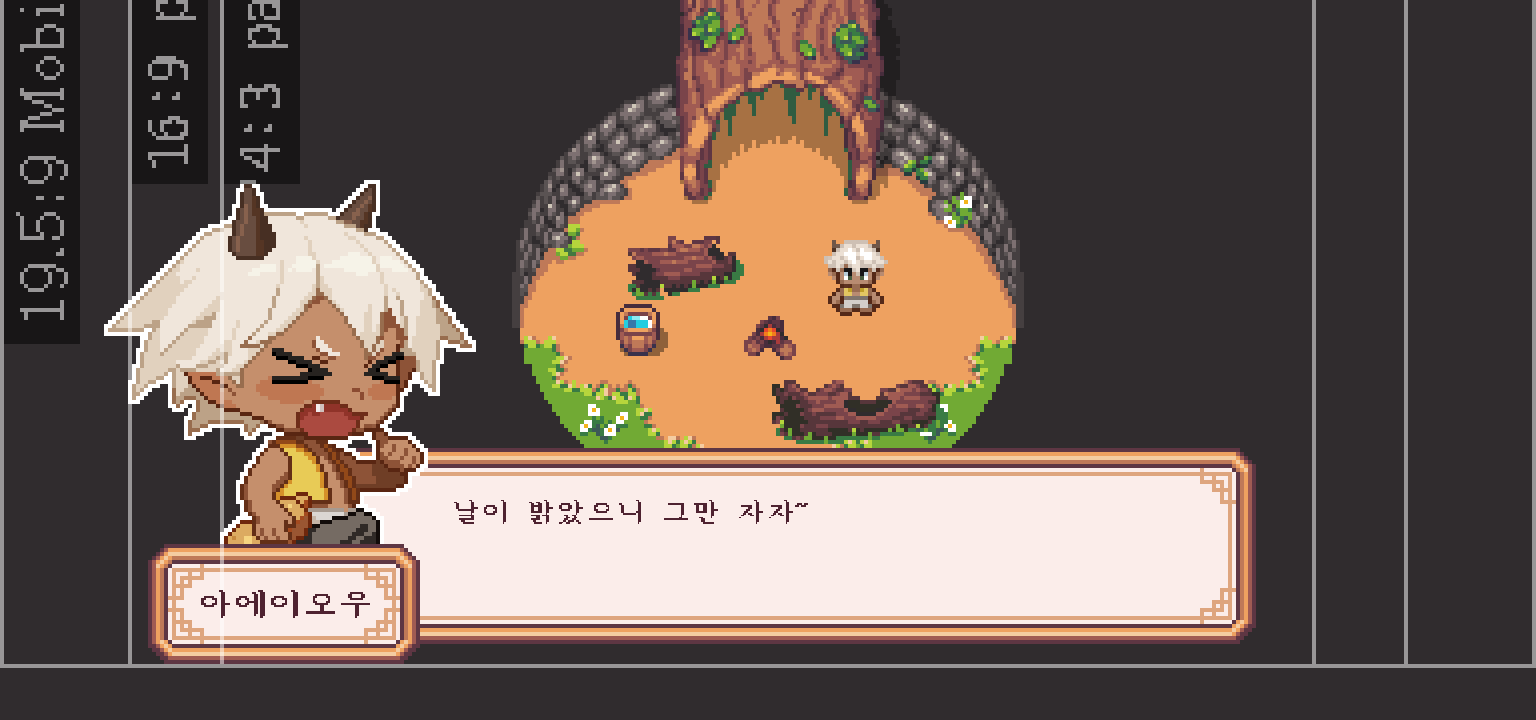
<style>
.page{position:relative;width:1536px;height:720px;background:#302c2e}
.page>*{position:absolute;margin:0}
.t1{font:30px "Sam3KRFont";color:#4e2230}
.t2{font:35px "Sam3KRFont";color:#4e2230}
</style>
<div class="page">
<p class="t1" style="left:454px;top:500px;width:354px;height:24px">날이 밝았으니 그만 자자~</p>
<p class="t2" style="left:201px;top:590px;width:169px;height:28px">아에이오우</p>
</div>
